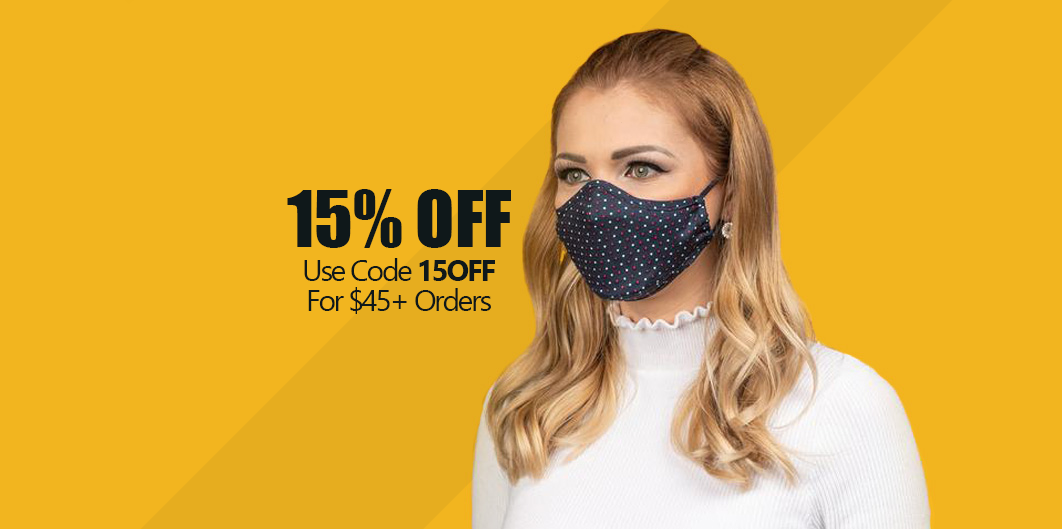
<style>
.page{position:relative;width:1062px;height:529px;background:#f2b51f}
.page>*{position:absolute;margin:0}
.t1{font:72px "Impact";color:#0f181a}
.t2{font:30px/30px "Gadugi";letter-spacing:-0.075em;color:#0f181a}
.t3{font:30px/30px "Gadugi-Bold";letter-spacing:-0.075em;color:#0f181a}
</style>
<div class="page">
<p class="t1" style="left:287px;top:189px;width:224px;height:59px">15% OFF</p>
<p class="t2" style="left:304px;top:258px;width:191px;height:56px;text-align:center">Use Code <span class="t3">15OFF<br></span>For $45+ Orders</p>
</div>
